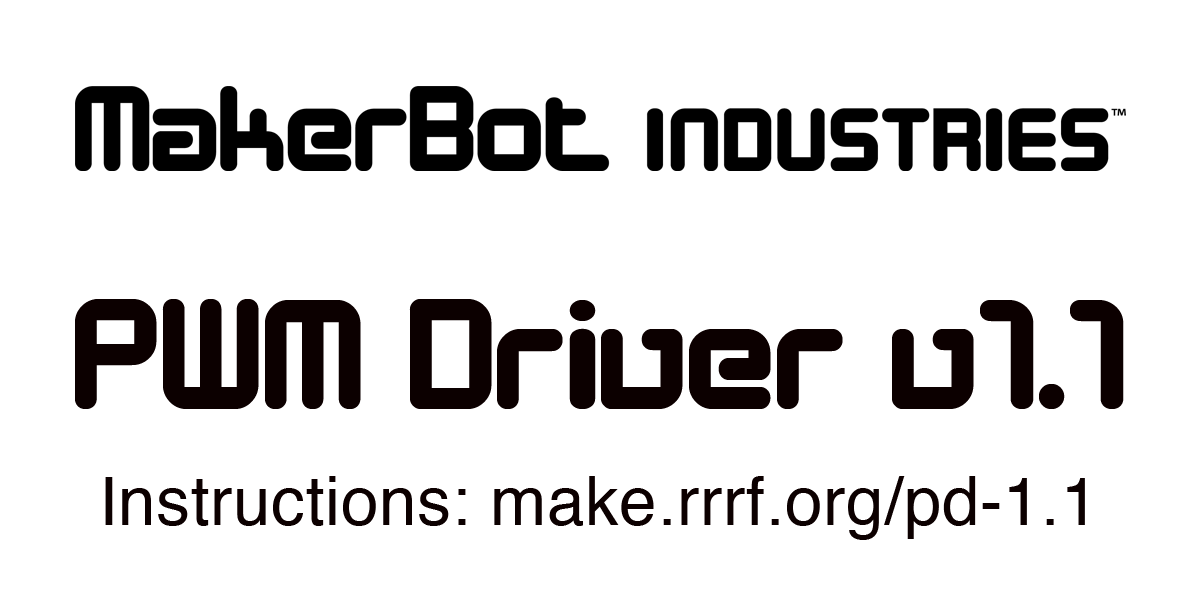
<style>
.page{position:relative;width:1200px;height:600px;background:#ffffff}
.page>*{position:absolute;margin:0}
.t1{font:157.8px "DesignerBlock";letter-spacing:0.01em;color:#0c0000}
.t2{font:67.4px "Helvetica";letter-spacing:0.01em;color:#0c0000}
</style>
<div class="page">
<p class="t1" style="left:75px;top:299px;width:1049px;height:110px">PWM Driver v1.1</p>
<p class="t2" style="left:105px;top:476px;width:980px;height:64px">Instructions: make.rrrf.org/pd-1.1</p>
</div>
